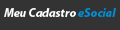
<style>
.page{position:relative;width:120px;height:30px;background:#333333}
.page>*{position:absolute;margin:0}
.t1{font:12px "MyriadPro-BoldIt";color:#ffffff}
.t2{font:12px "MyriadPro-BoldIt";color:#0090d9}
</style>
<div class="page">
<p class="t1" style="left:4px;top:8px;width:112px;height:9px">Meu Cadastro <span class="t2">eSocial</span></p>
</div>
